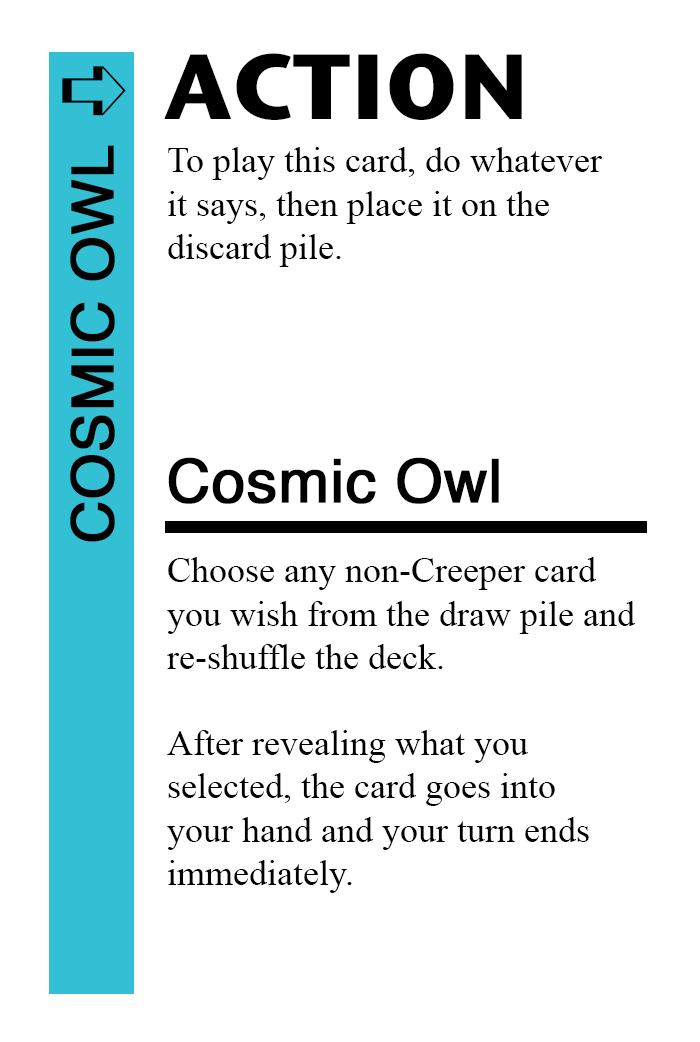
<style>
.page{position:relative;width:700px;height:1042px;background:#ffffff}
.page>*{position:absolute;margin:0}
.t1{font:92px "StoneSansITC-Bold";color:#000000}
.t2{font:82px "MS-Gothic";color:#000000}
.t3{font:58px "Helvetica";color:#000000;font-weight:bold}
.t4{font:36px "TimesNewRomanPSMT";color:#000000}
.t5{font:60px "Helvetica";color:#000000;font-weight:bold}
</style>
<div class="page">
<p class="t1" style="left:164px;top:53px;width:358px;height:67px">ACTION</p>
<p class="t2" style="left:62px;top:66px;width:64px;height:50px">➪</p>
<p class="t3" style="left:70px;top:145px;width:45px;height:397px;rotate:-90deg">COSMIC OWL</p>
<p class="t4" style="left:168px;top:147px;width:435px;height:120px">To play this card, do whatever<br>it says, then place it on the<br>discard pile.</p>
<p class="t5" style="left:168px;top:457px;width:331px;height:47px">Cosmic Owl</p>
<p class="t4" style="left:167px;top:557px;width:469px;height:336px">Choose any non-Creeper card<br>you wish from the draw pile and<br>re-shuffle the deck. <br><br>After revealing what you <br>selected, the card goes into <br>your hand and your turn ends <br>immediately.</p>
</div>
